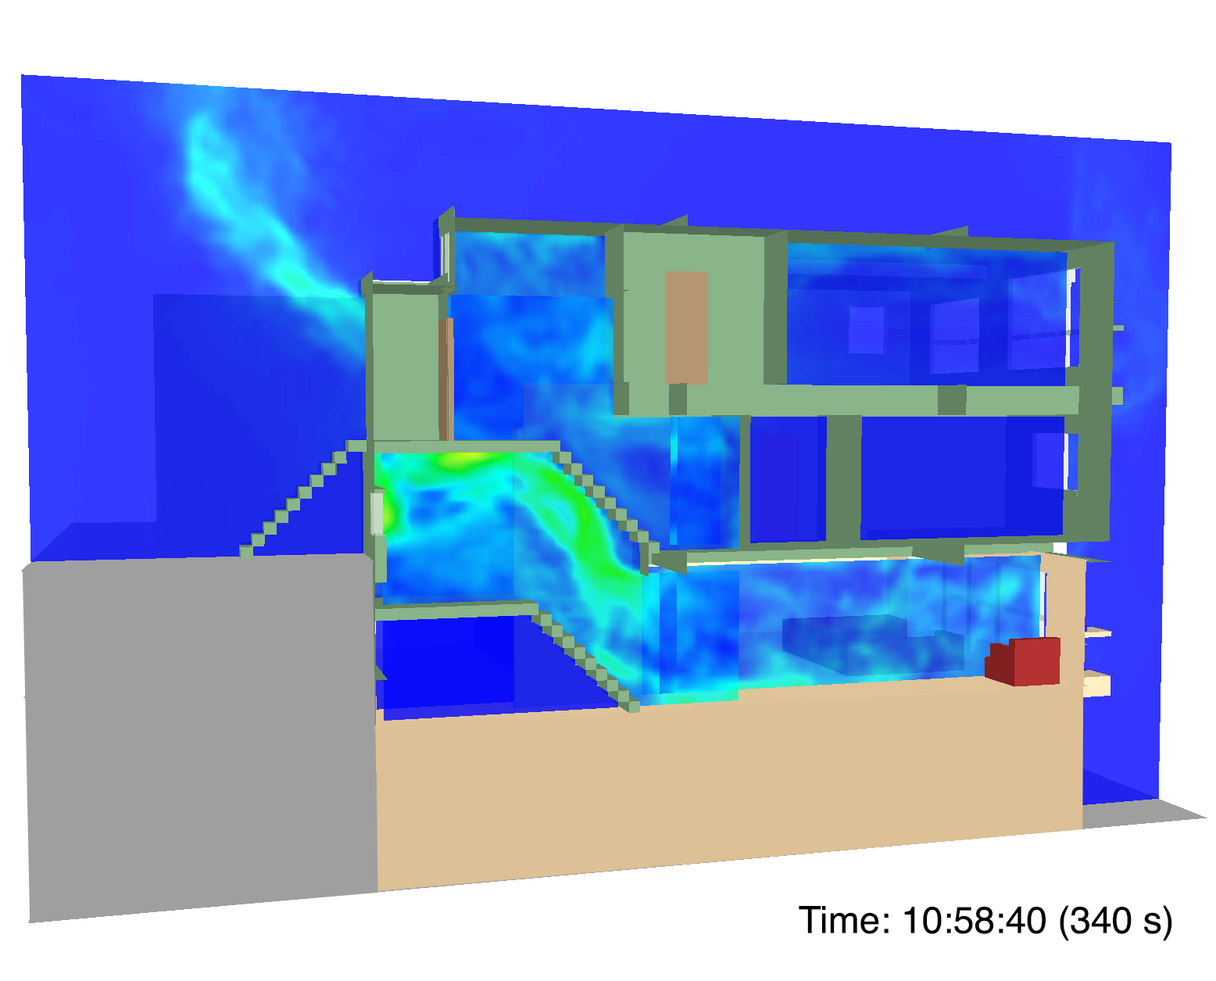
<style>
.page{position:relative;width:1216px;height:981px;background:#ffffff}
.page>*{position:absolute;margin:0}
.t1{font:37.5px "Helvetica";color:#000000}
</style>
<div class="page">
<p class="t1" style="left:799px;top:905px;width:373px;height:36px">Time: 10:58:40 (340 s)</p>
</div>
